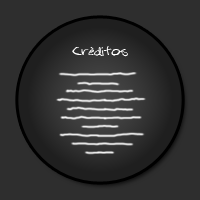
<style>
.page{position:relative;width:200px;height:200px;background:#2e2e2e}
.page>*{position:absolute;margin:0}
.t1{font:10.7px "2Dumb";color:#ffffff}
</style>
<div class="page">
<p class="t1" style="left:72px;top:46px;width:56px;height:11px">Créditos</p>
</div>
